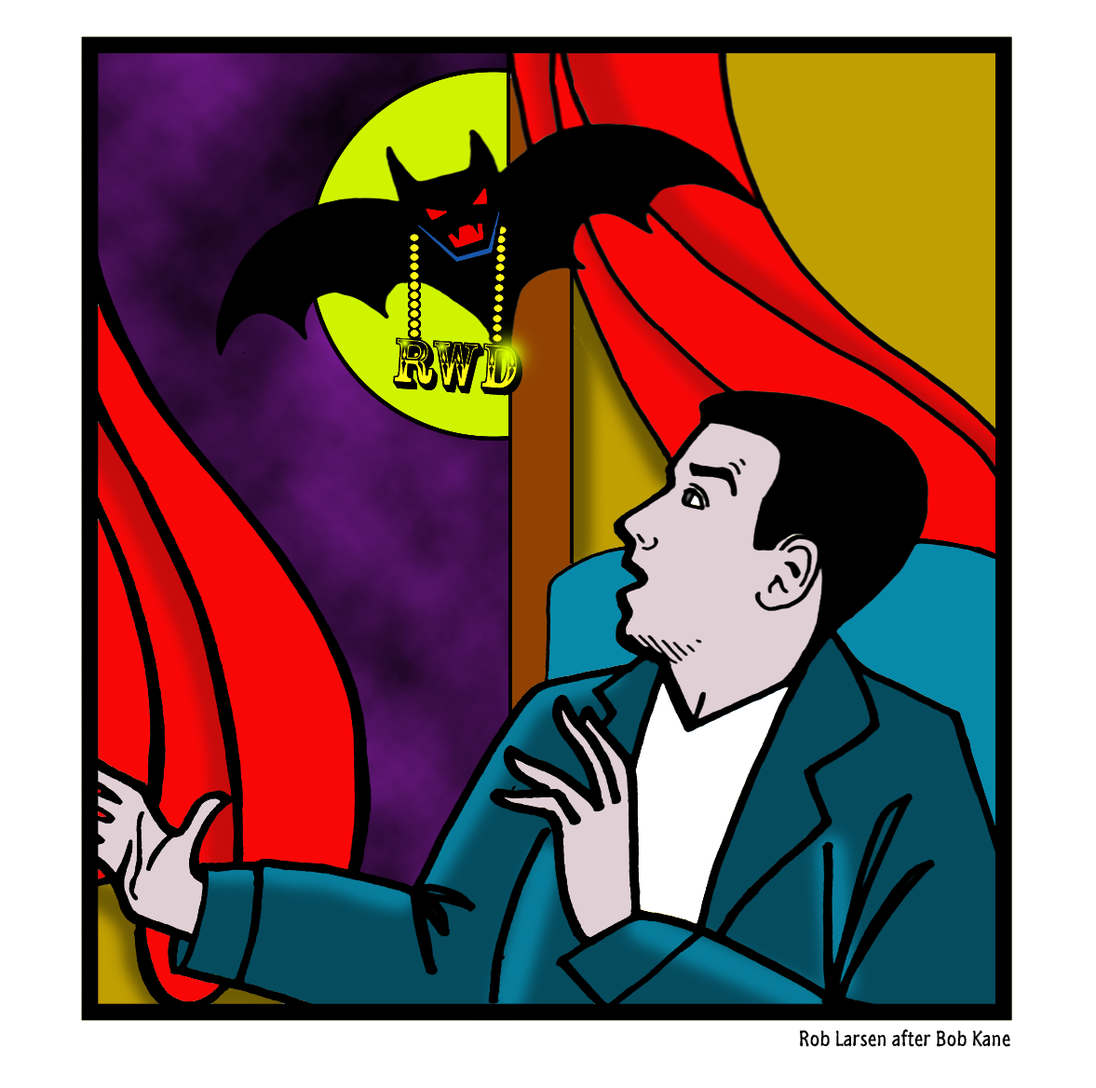
<style>
.page{position:relative;width:1096px;height:1088px;background:#ffffff}
.page>*{position:absolute;margin:0}
.t1{font:22.4px "SegoeMarker";color:#000000}
</style>
<div class="page">
<p class="t1" style="left:800px;top:1029px;width:211px;height:18px">Rob Larsen after Bob Kane</p>
</div>
